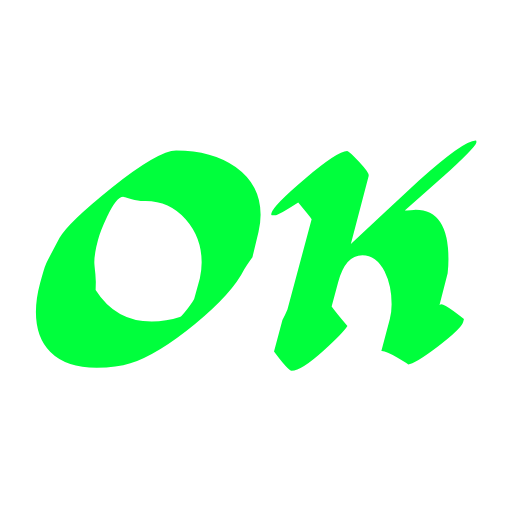
<style>
.page{position:relative;width:512px;height:512px;background:#ffffff}
.page>*{position:absolute;margin:0}
.t1{font:263.1px "FloranteatLauraItalic";color:#00ff3c}
</style>
<div class="page">
<p class="t1" style="left:35px;top:140px;width:442px;height:231px">OK</p>
</div>
